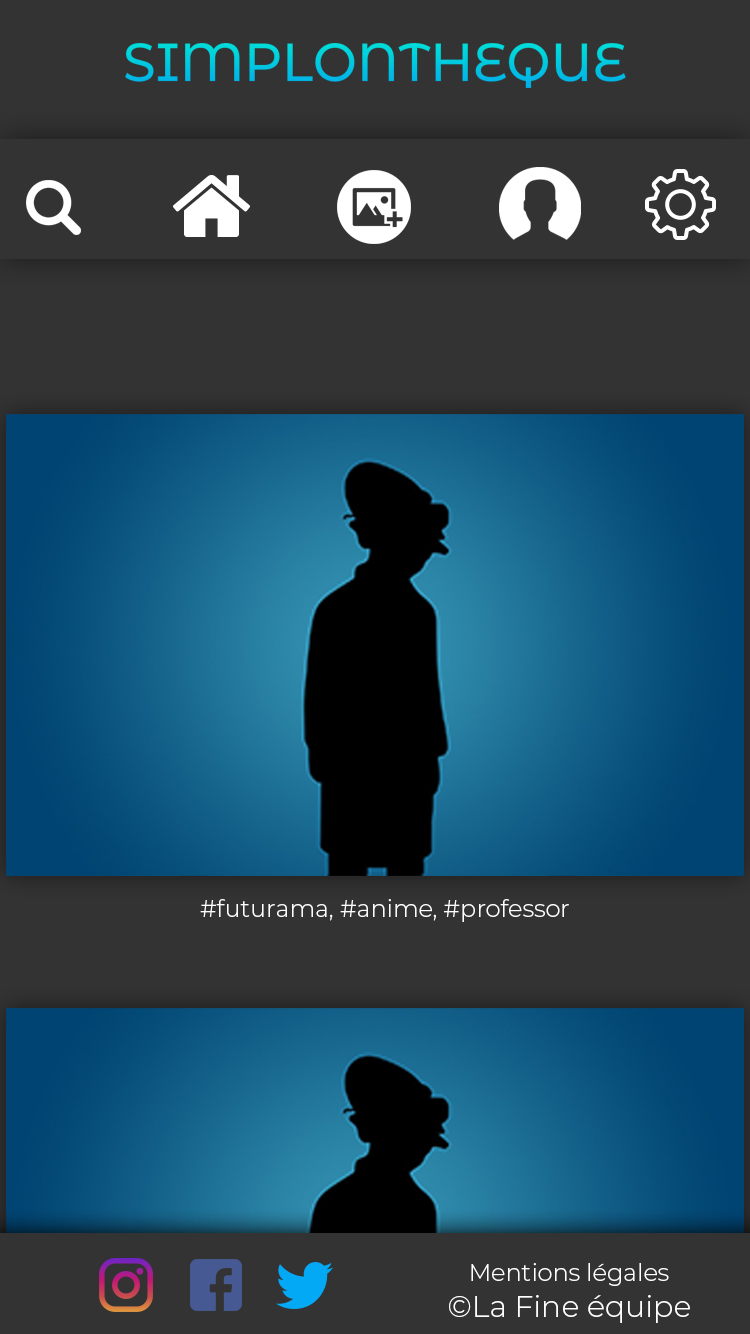
<style>
.page{position:relative;width:750px;height:1334px;background:#333333}
.page>*{position:absolute;margin:0}
.t1{font:24px "Montserrat-Light";color:#ffffff}
.t2{font:30px "Montserrat-Light";color:#ffffff}
</style>
<div class="page">
<p class="t1" style="left:200px;top:899px;width:369px;height:23px">#futurama, #anime, #professor</p>
<p class="t1" style="left:471px;top:1263px;width:198px;height:23px">Mentions légales</p>
<p class="t2" style="left:449px;top:1295px;width:241px;height:28px">©La Fine équipe</p>
</div>
